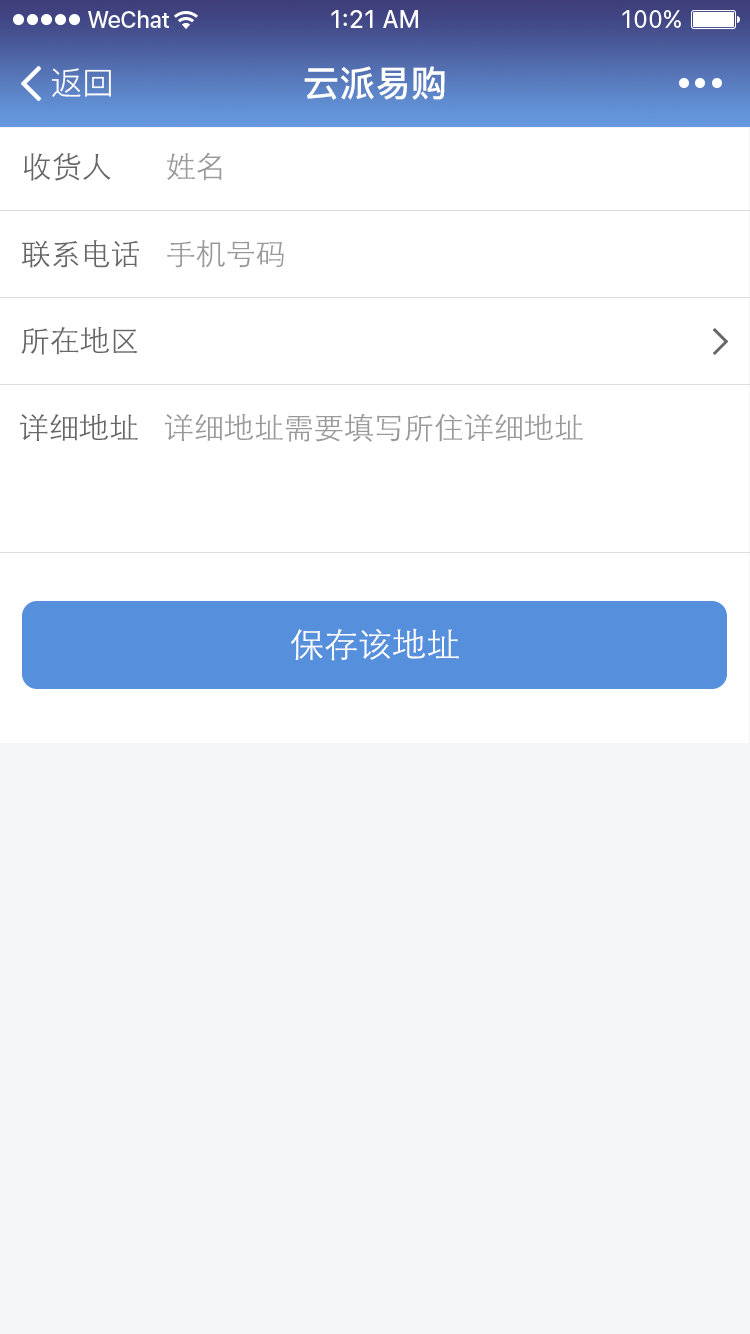
<style>
.page{position:relative;width:750px;height:1334px;background:#f4f5f6}
.page>*{position:absolute;margin:0}
.t1{font:32px "PingFang-SC-Regular";color:#ffffff}
.t2{font:36px "PingFang-SC-Bold";color:#ffffff}
.t3{font:30px "STXihei";color:#666666}
.t4{font:30px "STXihei";color:#999999}
.t5{font:34px "STXihei";color:#ffffff}
</style>
<div class="page">
<p class="t1" style="left:52px;top:68px;width:59px;height:29px">返回</p>
<p class="t2" style="left:304px;top:66px;width:141px;height:34px">云派易购</p>
<p class="t3" style="left:23px;top:152px;width:88px;height:29px">收货人</p>
<p class="t4" style="left:167px;top:152px;width:55px;height:29px">姓名</p>
<p class="t3" style="left:21px;top:240px;width:118px;height:28px">联系电话</p>
<p class="t4" style="left:167px;top:240px;width:117px;height:28px">手机号码</p>
<p class="t3" style="left:21px;top:326px;width:116px;height:29px">所在地区</p>
<p class="t3" style="left:20px;top:413px;width:118px;height:28px">详细地址</p>
<p class="t4" style="left:165px;top:413px;width:418px;height:29px">详细地址需要填写所住详细地址</p>
<p class="t5" style="left:290px;top:628px;width:169px;height:33px">保存该地址</p>
</div>
